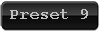
<style>
.page{position:relative;width:100px;height:32px}
.page>*{position:absolute;margin:0}
.t1{font:16px "CourierNewPS-BoldMT";color:#bfbfbf}
</style>
<div class="page">
<p class="t1" style="left:10px;top:9px;width:78px;height:10px">Preset 9</p>
</div>
